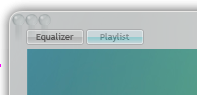
<style>
.page{position:relative;width:197px;height:95px}
.page>*{position:absolute;margin:0}
.t1{font:9px "TrebuchetMS";color:#545454}
.t2{font:9px "TrebuchetMS"}
</style>
<div class="page">
<p class="t1" style="left:36px;top:33px;width:38px;height:9px">Equalizer</p>
<p class="t2" style="left:100px;top:33px;width:30px;height:9px">Playlist</p>
</div>
